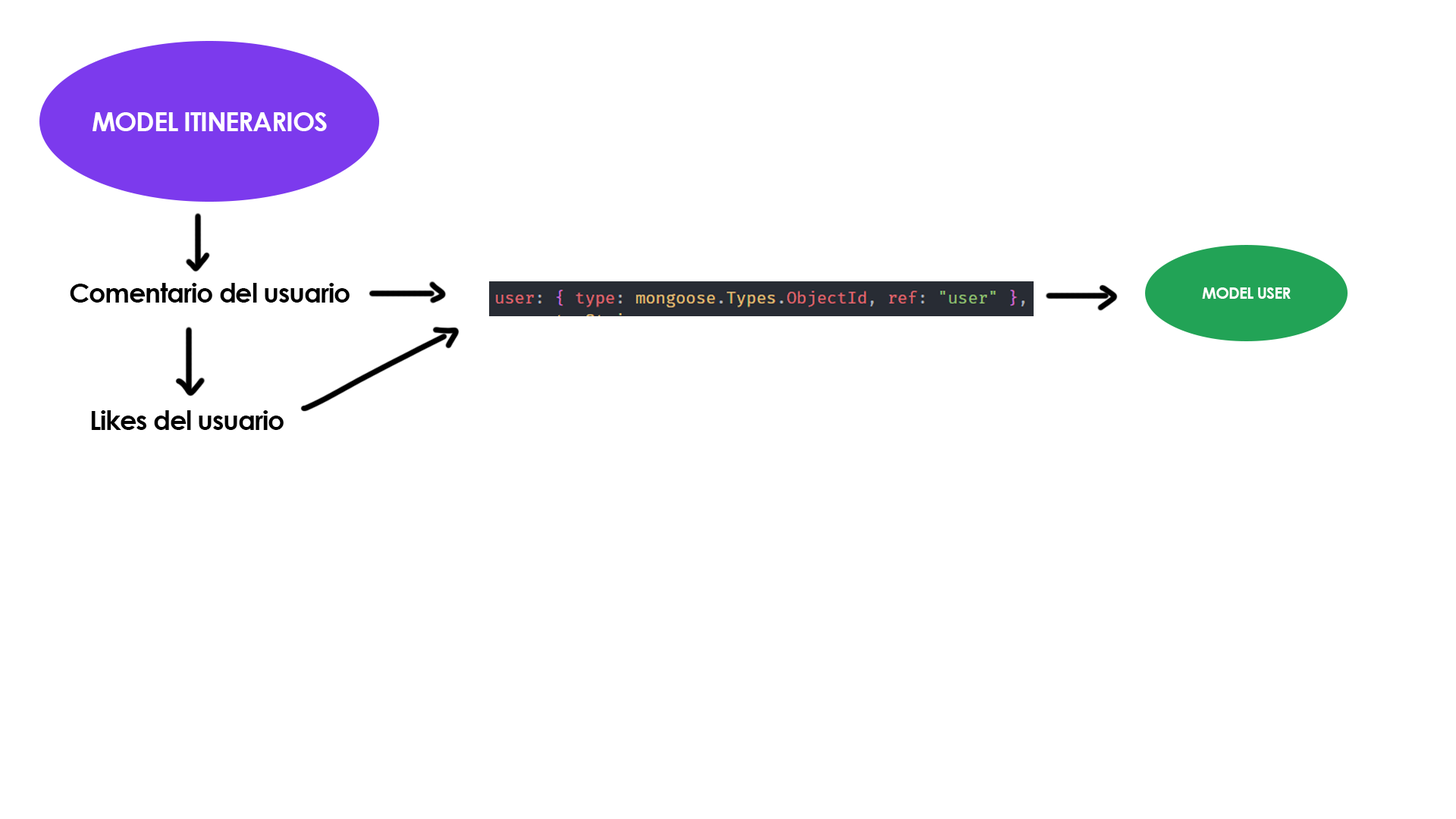
<style>
.page{position:relative;width:1456px;height:819px;background:#ffffff}
.page>*{position:absolute;margin:0}
.t1{font:26.8px "CenturyGothic-Bold";letter-spacing:-0.04em;color:#ffffff}
.t2{font:26.8px "CenturyGothic-Bold";letter-spacing:-0.04em;color:#000000}
.t3{font:16px "CenturyGothic-Bold";letter-spacing:-0.04em;color:#ffffff}
</style>
<div class="page">
<p class="t1" style="left:93px;top:112px;width:234px;height:19px">MODEL ITINERARIOS</p>
<p class="t2" style="left:70px;top:283px;width:280px;height:20px">Comentario del usuario</p>
<p class="t3" style="left:1202px;top:287px;width:89px;height:12px">MODEL USER</p>
<p class="t2" style="left:91px;top:410px;width:193px;height:20px">Likes del usuario</p>
</div>
